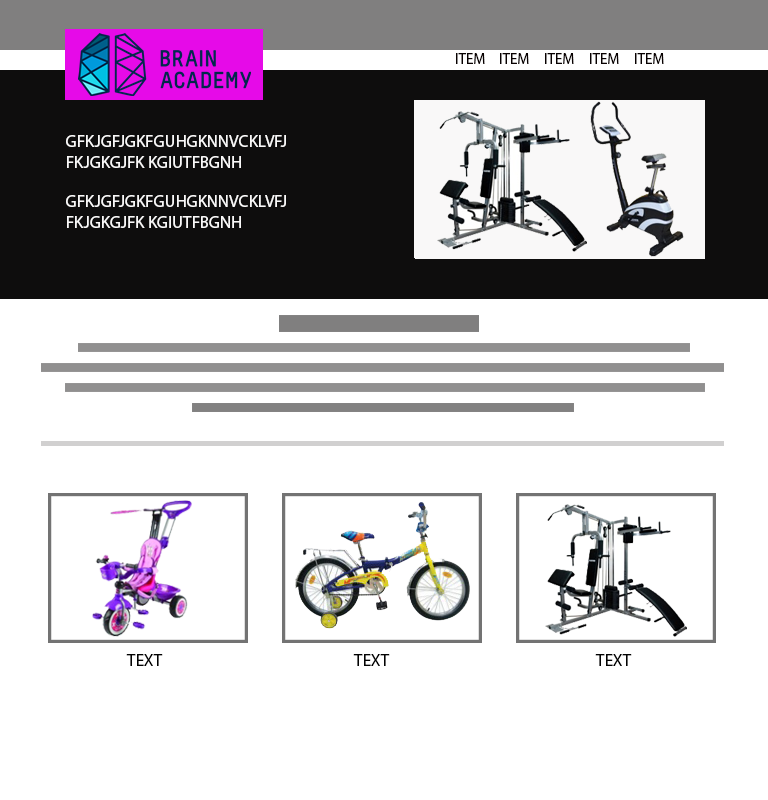
<style>
.page{position:relative;width:768px;height:800px;background:#ffffff}
.page>*{position:absolute;margin:0}
.t1{font:15px "MyriadPro-Regular";color:#080101}
.t2{font:17px "MyriadPro-Regular";color:#f9f8f8}
.t3{font:17px "MyriadPro-Regular";color:#020202}
</style>
<div class="page">
<p class="t1" style="left:456px;top:53px;width:29px;height:11px">ITEM</p>
<p class="t1" style="left:500px;top:53px;width:29px;height:11px">ITEM</p>
<p class="t1" style="left:545px;top:53px;width:29px;height:11px">ITEM</p>
<p class="t1" style="left:590px;top:53px;width:29px;height:11px">ITEM</p>
<p class="t1" style="left:635px;top:53px;width:29px;height:11px">ITEM</p>
<p class="t2" style="left:66px;top:135px;width:220px;height:33px">GFKJGFJGKFGUHGKNNVCKLVFJ<br>FKJGKGJFK KGIUTFBGNH</p>
<p class="t2" style="left:66px;top:195px;width:220px;height:33px">GFKJGFJGKFGUHGKNNVCKLVFJ<br>FKJGKGJFK KGIUTFBGNH</p>
<p class="t3" style="left:126px;top:654px;width:37px;height:12px">TEXT</p>
<p class="t3" style="left:353px;top:654px;width:37px;height:12px">TEXT</p>
<p class="t3" style="left:595px;top:654px;width:37px;height:12px">TEXT</p>
</div>
